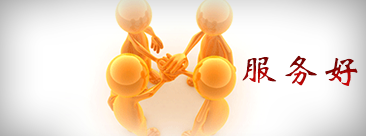
<style>
.page{position:relative;width:366px;height:136px}
.page>*{position:absolute;margin:0}
.t1{font:37px "STXinwei";letter-spacing:0.12em}
</style>
<div class="page">
<p class="t1" style="left:242px;top:55px;width:116px;height:31px">服务好</p>
</div>
